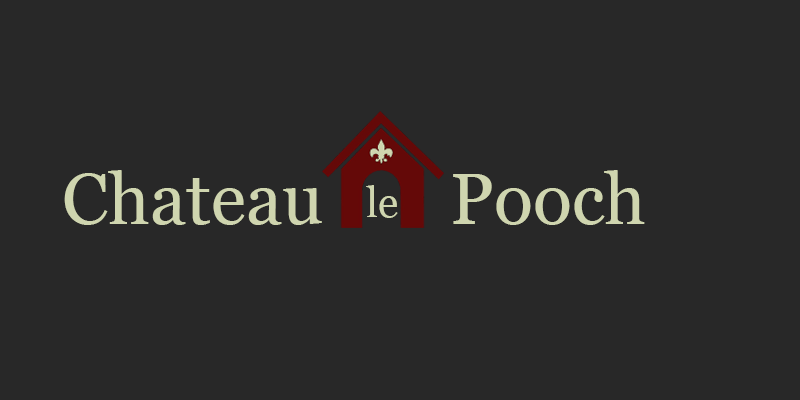
<style>
.page{position:relative;width:800px;height:400px;background:#282828}
.page>*{position:absolute;margin:0}
.t1{font:72px "Georgia";color:#cfd5af}
.t2{font:42px "Georgia";color:#cfd5af}
</style>
<div class="page">
<p class="t1" style="left:64px;top:170px;width:258px;height:55px">Chateau</p>
<p class="t1" style="left:453px;top:170px;width:192px;height:55px">Pooch</p>
<p class="t2" style="left:366px;top:185px;width:32px;height:33px">le</p>
</div>
